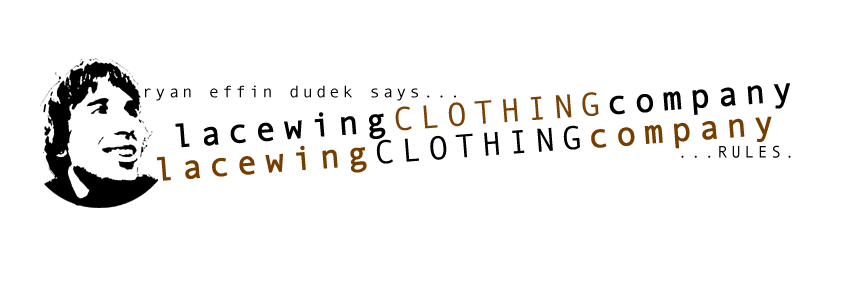
<style>
.page{position:relative;width:864px;height:288px;background:#ffffff}
.page>*{position:absolute;margin:0}
.t1{font:33.5px "AndaleMono";letter-spacing:0.2em;color:#000000;font-weight:bold}
.t2{font:33.5px "AndaleMono";letter-spacing:0.2em;color:#7a4207}
.t3{font:33.5px "AndaleMono";letter-spacing:0.2em;color:#763d00;font-weight:bold}
.t4{font:33.5px "AndaleMono";letter-spacing:0.2em;color:#000000}
</style>
<div class="page">
<p class="t1" style="left:175px;top:83px;width:615px;height:65px;rotate:-4deg">lacewing<span class="t2">CLOTHING</span>company</p>
<p class="t3" style="left:156px;top:116px;width:616px;height:65px;rotate:-4deg">lacewing<span class="t4">CLOTHING</span>company</p>
</div>
